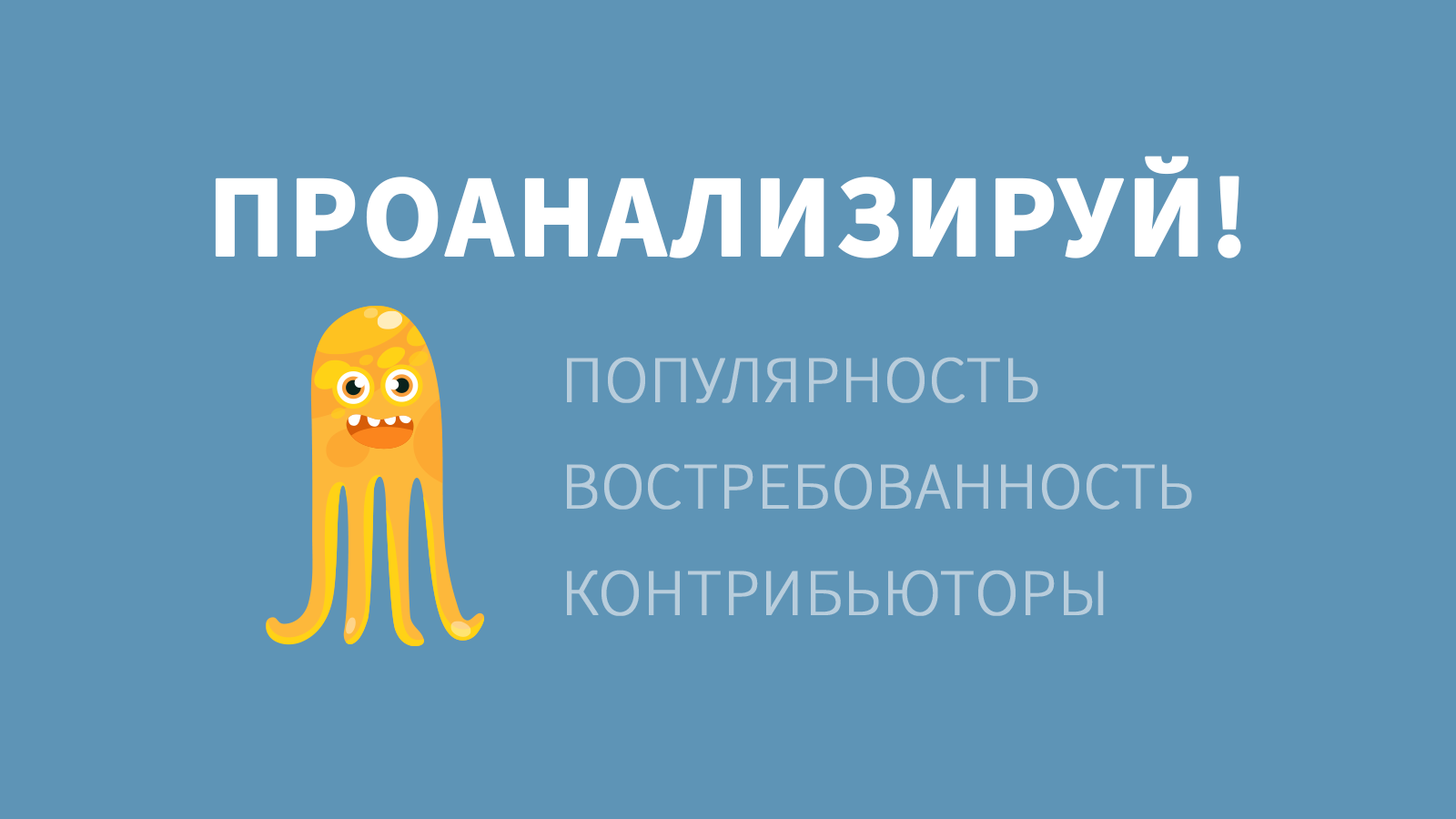
<style>
.page{position:relative;width:1456px;height:819px;background:#5e94b6}
.page>*{position:absolute;margin:0}
.t1{font:117.8px "SourceSansPro-Bold";color:#ffffff;text-transform:uppercase;font-weight:bold}
.t2{font:65.5px "SourceSansPro-Light";color:#b8cddc;text-transform:uppercase;font-weight:bold}
</style>
<div class="page">
<p class="t1" style="left:215px;top:156px;width:1026px;height:102px">Проанализируй!</p>
<p class="t2" style="left:567px;top:357px;width:471px;height:46px">Популярность</p>
<p class="t2" style="left:567px;top:463px;width:625px;height:47px">Востребованность</p>
<p class="t2" style="left:567px;top:570px;width:537px;height:46px">Контрибьюторы</p>
</div>
